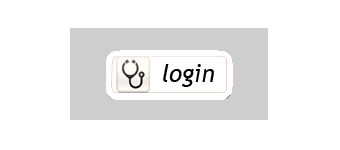
<style>
.page{position:relative;width:340px;height:150px;background:#ffffff}
.page>*{position:absolute;margin:0}
.t1{font:24px "TrebuchetMS-Italic";color:#020202}
</style>
<div class="page">
<p class="t1" style="left:163px;top:64px;width:51px;height:23px">login</p>
</div>
